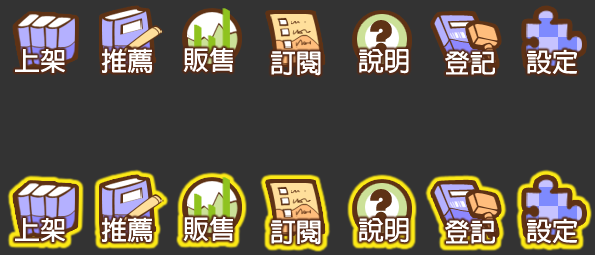
<style>
.page{position:relative;width:595px;height:255px;background:#333333}
.page>*{position:absolute;margin:0}
.t1{font:49px "Bauhaus93";color:#5e3215}
.t2{font:26px "AdobeFanHeitiStd-Bold";color:#ffffff}
</style>
<div class="page">
<p class="t1" style="left:370px;top:20px;width:22px;height:35px">?</p>
<p class="t2" style="left:15px;top:49px;width:50px;height:24px">上架</p>
<p class="t2" style="left:101px;top:48px;width:51px;height:25px">推薦</p>
<p class="t2" style="left:183px;top:47px;width:50px;height:25px">販售</p>
<p class="t2" style="left:271px;top:51px;width:50px;height:25px">訂閱</p>
<p class="t2" style="left:359px;top:49px;width:50px;height:25px">說明</p>
<p class="t2" style="left:445px;top:50px;width:50px;height:25px">登記</p>
<p class="t2" style="left:527px;top:49px;width:50px;height:26px">設定</p>
</div>
